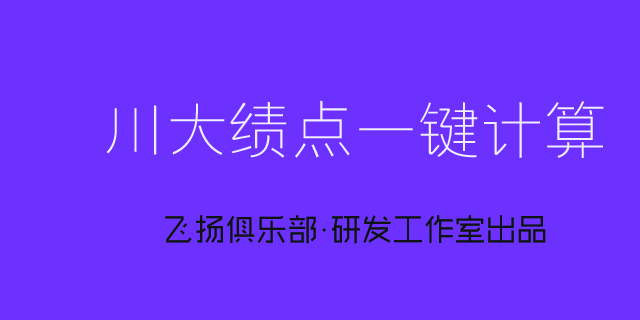
<style>
.page{position:relative;width:640px;height:320px;background:#6c31ff}
.page>*{position:absolute;margin:0}
.t1{font:63px "FZYXJW--GB1-0";color:#f3eefd}
.t2{font:31px "MFShangHei_Noncommercial-Regular";color:#0f1215}
</style>
<div class="page">
<p class="t1" style="left:106px;top:100px;width:498px;height:58px">川大绩点一键计算</p>
<p class="t2" style="left:165px;top:215px;width:381px;height:29px">飞扬俱乐部·研发工作室出品</p>
</div>
